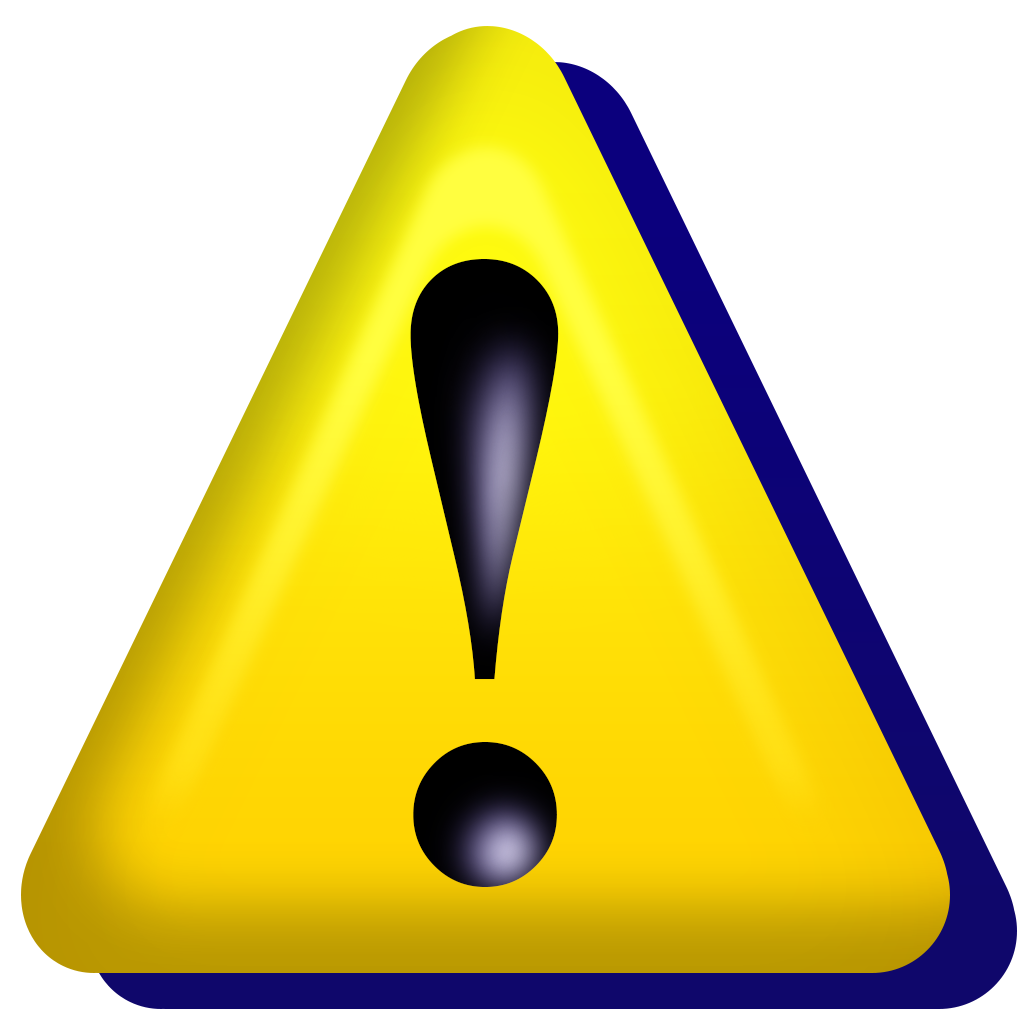
<style>
.page{position:relative;width:1024px;height:1024px;background:#ffffff}
.page>*{position:absolute;margin:0}
.t1{font:908.3px "TimesNewRomanPS-BoldMT";letter-spacing:-0.025em}
</style>
<div class="page">
<p class="t1" style="left:410px;top:259px;width:149px;height:628px">!</p>
</div>
